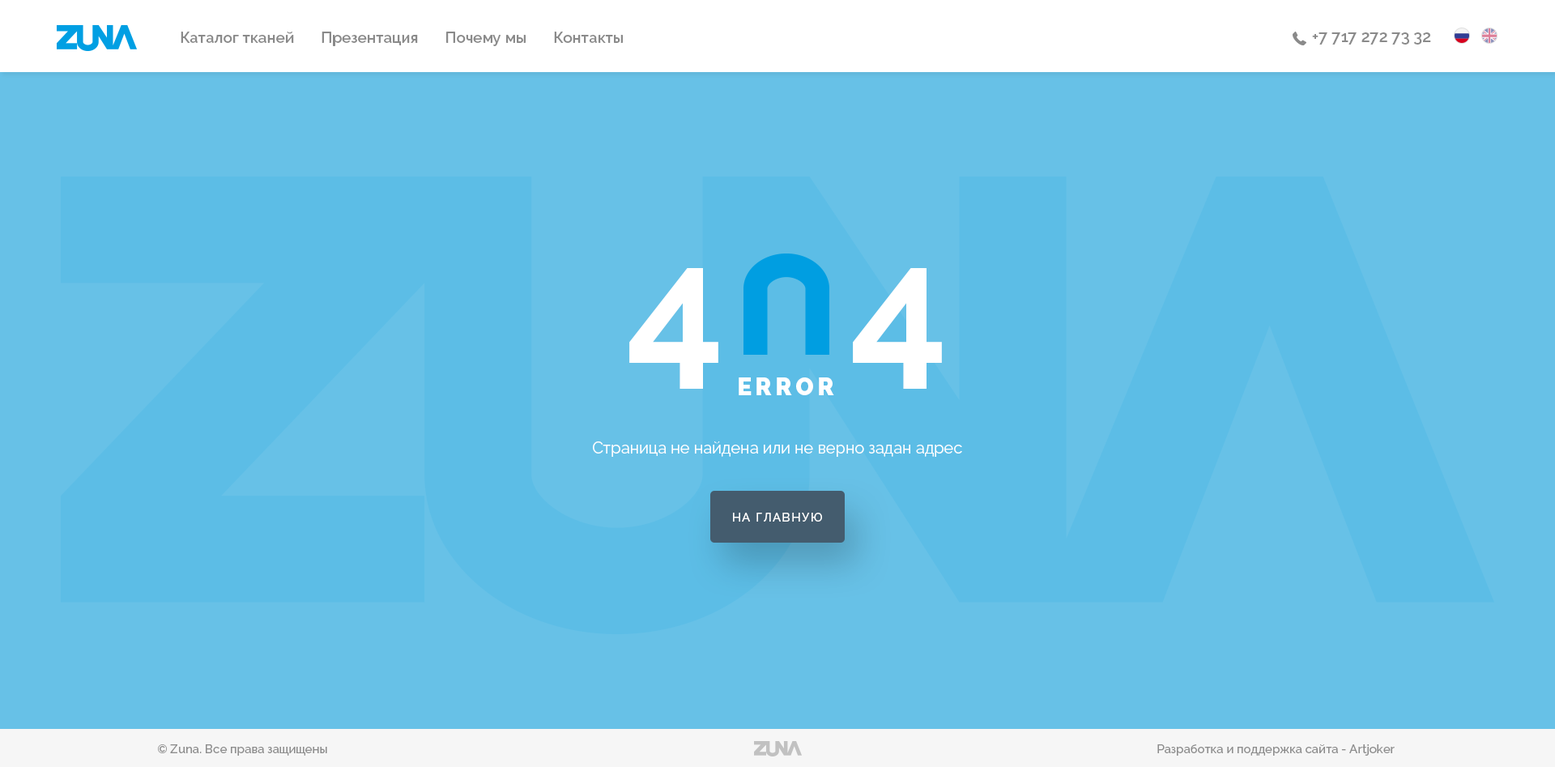
<style>
.page{position:relative;width:1555px;height:767px;background:#67c1e7}
.page>*{position:absolute;margin:0}
.t1{font:15.4px "Raleway-SemiBold";color:#8a8a8a}
.t2{font:16.2px "Raleway-SemiBold";color:#8a8a8a}
.t3{font:173.3px "Raleway-Bold";color:#ffffff}
.t4{font:24.3px "Raleway-Black";letter-spacing:0.15em;color:#ffffff;text-transform:uppercase}
.t5{font:16.2px "Raleway-Regular";color:#ffffff}
.t6{font:12.1px "Raleway-Medium";letter-spacing:0.1em;color:#ffffff;text-transform:uppercase}
.t7{font:12.1px "Raleway-Medium";color:#8d8d8d}
</style>
<div class="page">
<p class="t1" style="left:181px;top:32px;width:442px;height:14px">Каталог тканей       Презентация       Почему мы       Контакты</p>
<p class="t2" style="left:1312px;top:32px;width:119px;height:13px">+7 717 272 73 32</p>
<p class="t3" style="left:629px;top:268px;width:313px;height:121px">4   4</p>
<p class="t4" style="left:739px;top:377px;width:95px;height:18px">error</p>
<p class="t5" style="left:593px;top:441px;width:369px;height:16px">Страница не найдена или не верно задан адрес</p>
<p class="t6" style="left:733px;top:513px;width:89px;height:9px">на главную</p>
<p class="t7" style="left:158px;top:744px;width:169px;height:12px">© Zuna. Все права защищены</p>
<p class="t7" style="left:1157px;top:744px;width:238px;height:12px">Разработка и поддержка сайта - Artjoker</p>
</div>
